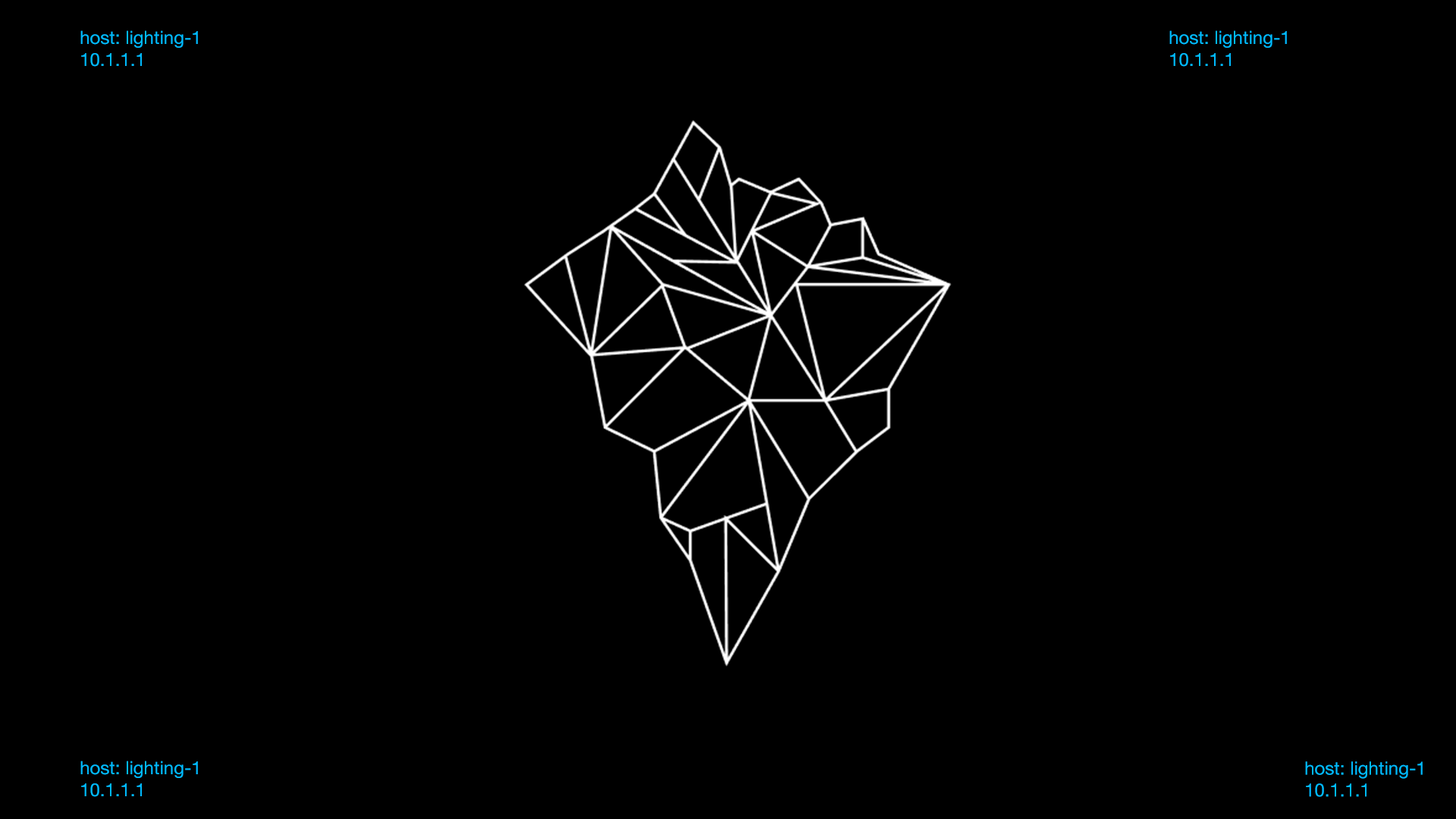
<style>
.page{position:relative;width:1456px;height:819px;background:#000000}
.page>*{position:absolute;margin:0}
.t1{font:18.2px "HelveticaNeue";color:#00bbff}
</style>
<div class="page">
<p class="t1" style="left:80px;top:30px;width:118px;height:37px">host: lighting-1<br>10.1.1.1</p>
<p class="t1" style="left:1169px;top:30px;width:118px;height:37px">host: lighting-1<br>10.1.1.1</p>
<p class="t1" style="left:80px;top:761px;width:118px;height:36px">host: lighting-1<br>10.1.1.1</p>
<p class="t1" style="left:1305px;top:761px;width:118px;height:36px">host: lighting-1<br>10.1.1.1</p>
</div>
